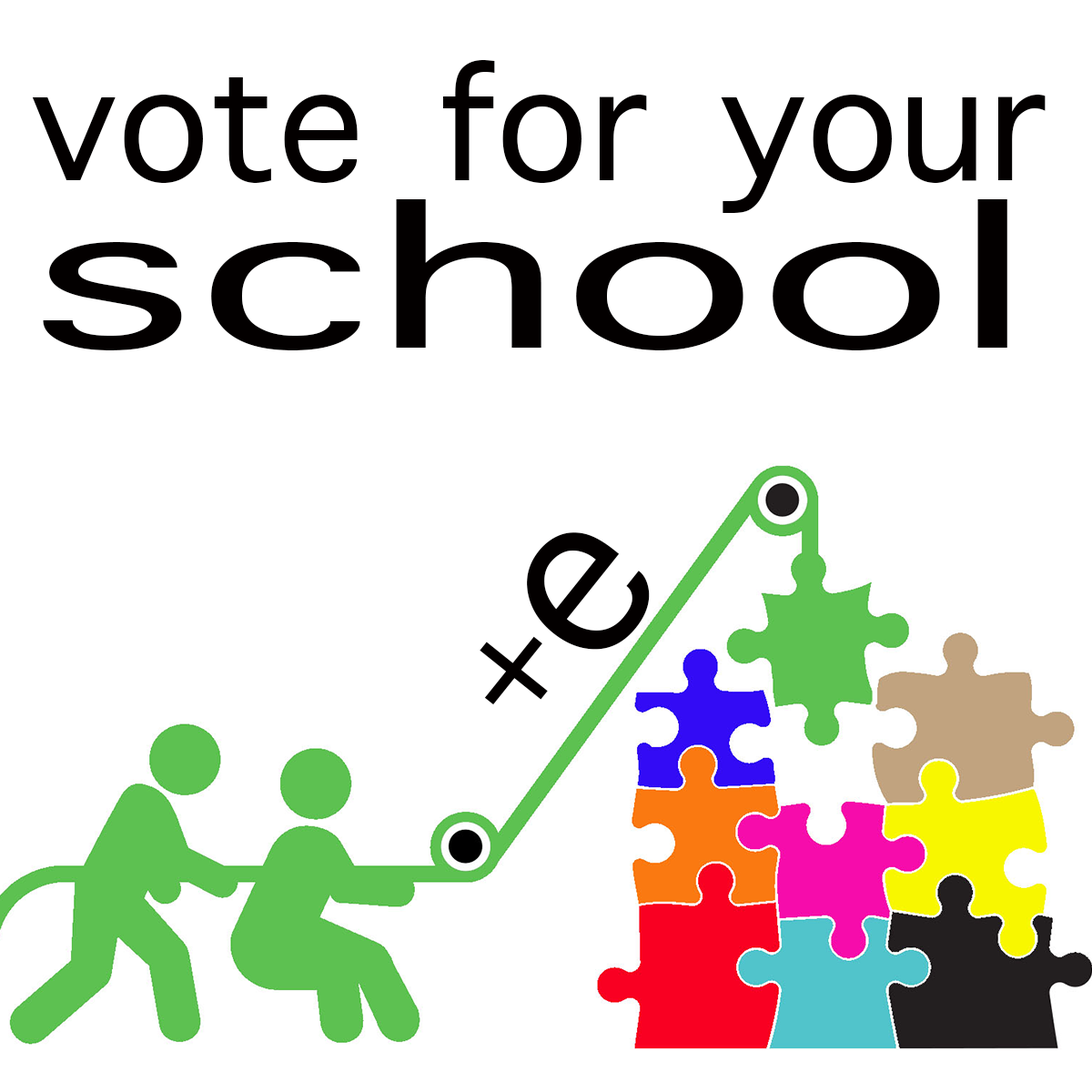
<style>
.page{position:relative;width:1092px;height:1092px;background:#ffffff}
.page>*{position:absolute;margin:0}
.t1{font:214.9px/121.3px "AppleSymbols";color:#030000}
.t2{font:265.4px/166.8px "AppleSymbols";color:#030000;scale:1.72 1}
.t3{font:303.3px "AppleSymbols";color:#030000}
.t4{font:202.2px "AppleSymbols";color:#030000}
</style>
<div class="page">
<p class="t1" style="left:32px;top:60px;width:1014px;height:290px">vote for your <br><span class="t2">school</span></p>
<p class="t3" style="left:527px;top:532px;width:123px;height:118px;rotate:-51deg">e</p>
<p class="t4" style="left:480px;top:636px;width:68px;height:69px;rotate:-51deg">+</p>
</div>
